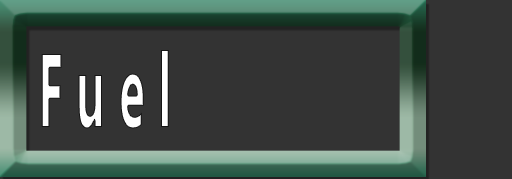
<style>
.page{position:relative;width:512px;height:179px;background:#333333}
.page>*{position:absolute;margin:0}
.t1{font:103.9px "SegoeWP-Bold";letter-spacing:0.28em;color:#ffffff;scale:0.46 1}
</style>
<div class="page">
<p class="t1" style="left:41px;top:50px;width:128px;height:79px">Fuel</p>
</div>
